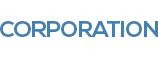
<style>
.page{position:relative;width:158px;height:57px;background:#ffffff}
.page>*{position:absolute;margin:0}
.t1{font:22.7px "NexaBold";letter-spacing:-0.025em;color:#4480b2}
</style>
<div class="page">
<p class="t1" style="left:0px;top:21px;width:158px;height:16px">CORPORATION</p>
</div>
